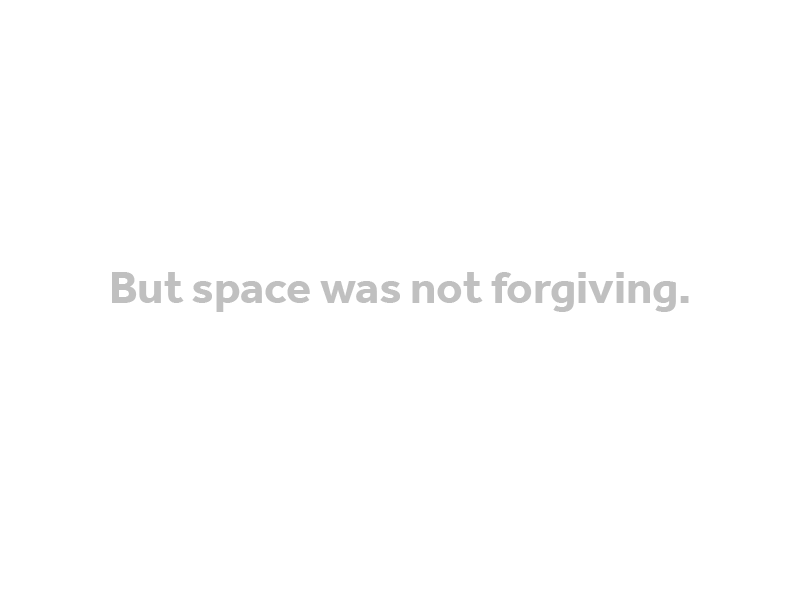
<style>
.page{position:relative;width:800px;height:600px;background:#ffffff}
.page>*{position:absolute;margin:0}
.t1{font:46.5px "Effra-Bold";color:#c0c0c0}
</style>
<div class="page">
<p class="t1" style="left:112px;top:272px;width:577px;height:40px">But space was not forgiving.</p>
</div>
